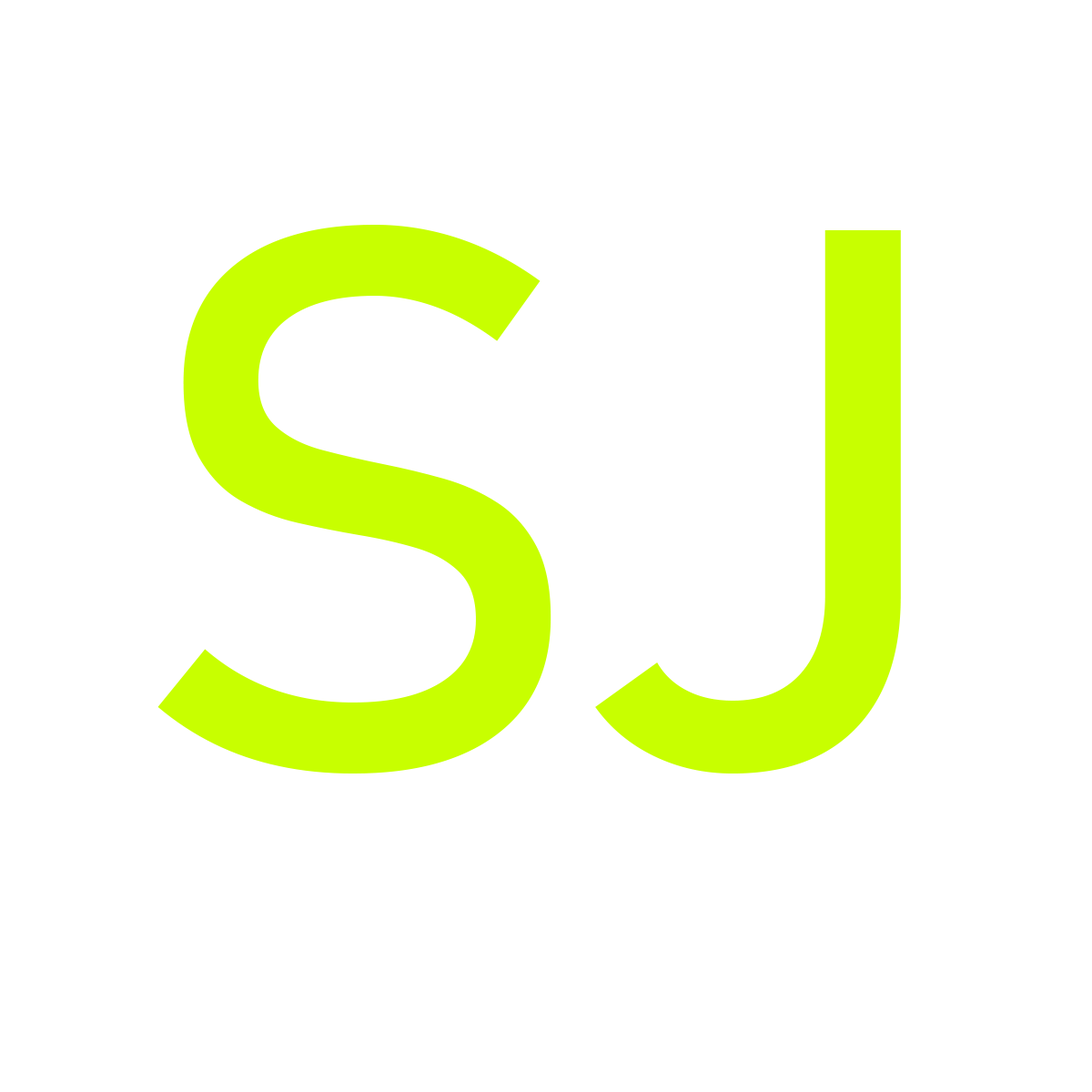
<style>
.page{position:relative;width:1092px;height:1092px;background:#ffffff}
.page>*{position:absolute;margin:0}
.t1{font:758.3px "Bahnschrift";letter-spacing:-0.01em;color:#c8ff00}
</style>
<div class="page">
<p class="t1" style="left:157px;top:225px;width:744px;height:548px">SJ</p>
</div>
